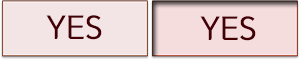
<style>
.page{position:relative;width:300px;height:60px;background:#f3e5e6}
.page>*{position:absolute;margin:0}
.t1{font:33px "DakiMTitle";color:#450005}
</style>
<div class="page">
<p class="t1" style="left:46px;top:15px;width:56px;height:25px">YES</p>
<p class="t1" style="left:200px;top:16px;width:56px;height:25px">YES</p>
</div>
